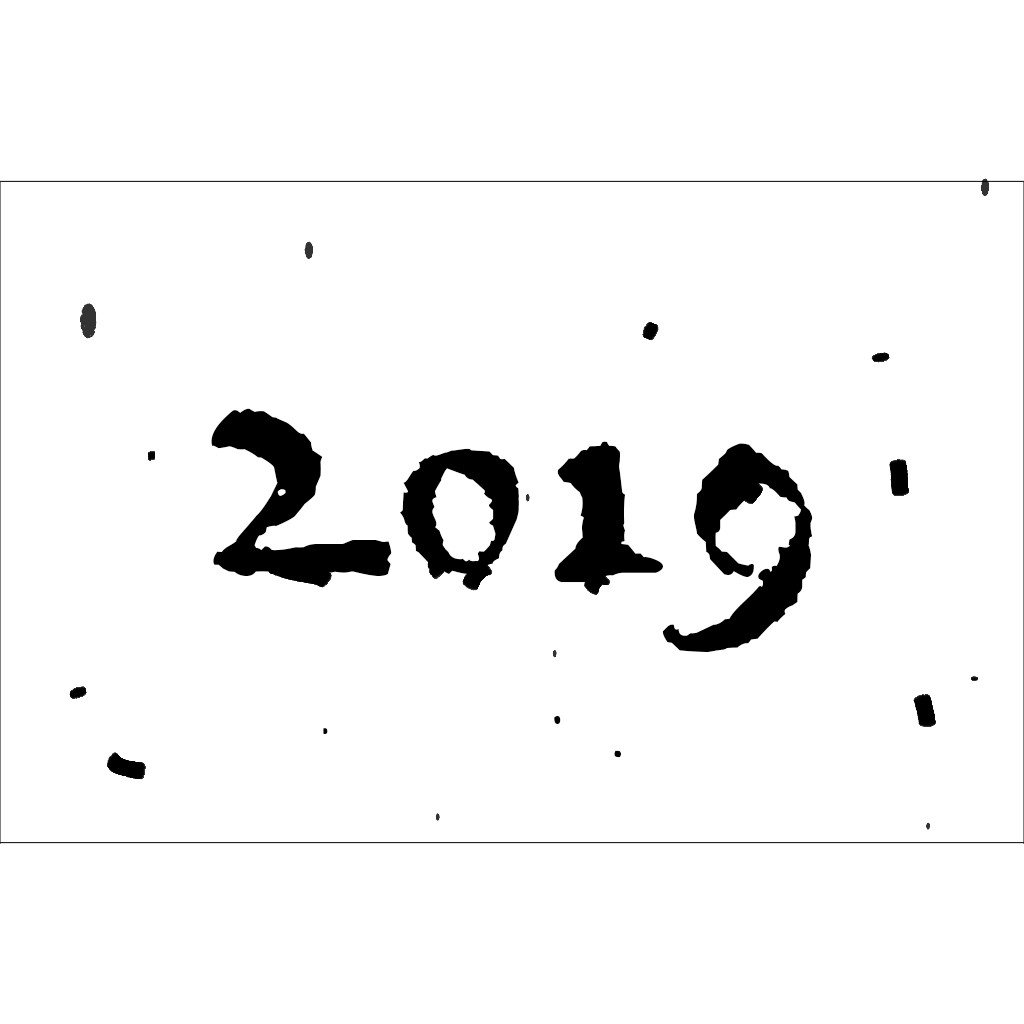
<style>
.page{position:relative;width:1024px;height:1024px;background:#ffffff}
.page>*{position:absolute;margin:0}
.t1{font:400px "1742Frenchcivilite";color:#000000}
</style>
<div class="page">
<p class="t1" style="left:211px;top:408px;width:602px;height:350px">2019</p>
</div>
